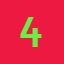
<style>
.page{position:relative;width:64px;height:64px;background:#ee1941}
.page>*{position:absolute;margin:0}
.t1{font:45.3px "Corbel-Bold";color:#67ef45}
</style>
<div class="page">
<p class="t1" style="left:20px;top:17px;width:22px;height:30px">4</p>
</div>
